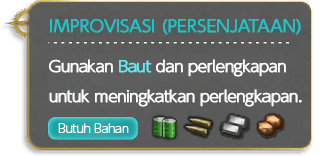
<style>
.page{position:relative;width:328px;height:156px}
.page>*{position:absolute;margin:0}
.t1{font:15px/30px "UDShinGoPro-Light";letter-spacing:-0.04em;color:#ffffff;font-weight:bold}
.t2{font:16px/40px "UDShinGoPro-Light";color:#14c9cb;font-weight:bold}
.t3{font:15px/40px "UDShinGoPro-Light";letter-spacing:-0.04em;color:#ffffff;font-weight:bold}
.t4{font:15px/30px "UDShinGoPro-Light";letter-spacing:-0.04em;color:#5eedf3;font-weight:bold}
.t5{font:12px "UDShinGoPro-Light";letter-spacing:-0.04em;color:#ffffff}
</style>
<div class="page">
<p class="t1" style="left:49px;top:19px;width:253px;height:88px"><span class="t2">IMPROVISASI (PERSENJATAAN)<br></span><span class="t3">Gunakan </span><span class="t4">Baut </span>dan perlengkapan<br>untuk meningkatkan perlengkapan.</p>
<p class="t5" style="left:58px;top:123px;width:71px;height:10px">Butuh Bahan</p>
</div>
